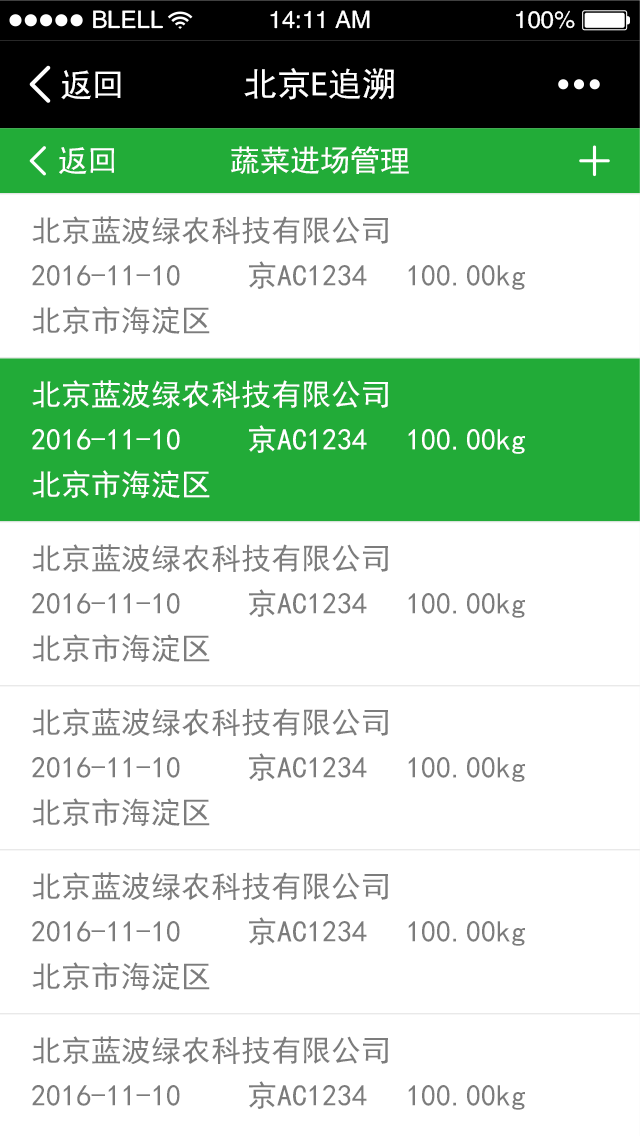
<style>
.page{position:relative;width:640px;height:1136px;background:#ffffff}
.page>*{position:absolute;margin:0}
.t1{font:24px "FZHTJW--GB1-0";color:#ffffff}
.t2{font:32px "SimHei";color:#ffffff}
.t3{font:34px "SimHei";color:#ffffff}
.t4{font:30px "SimHei";color:#ffffff}
.t5{font:30px/45px "SimHei";color:#7c7c7c}
.t6{font:30px/45px "SimHei";color:#ffffff}
</style>
<div class="page">
<p class="t1" style="left:93px;top:10px;width:70px;height:19px">BLELL</p>
<p class="t1" style="left:270px;top:10px;width:100px;height:19px">14:11 AM</p>
<p class="t1" style="left:516px;top:10px;width:59px;height:19px">100%</p>
<p class="t2" style="left:61px;top:70px;width:60px;height:30px">返回</p>
<p class="t3" style="left:244px;top:68px;width:150px;height:32px">北京E追溯</p>
<p class="t4" style="left:59px;top:147px;width:55px;height:27px">返回</p>
<p class="t4" style="left:231px;top:146px;width:178px;height:28px">蔬菜进场管理</p>
<p class="t5" style="left:32px;top:216px;width:493px;height:119px">北京蓝波绿农科技有限公司<br>2016-11-10  京AC1234  100.00kg<br>北京市海淀区</p>
<p class="t6" style="left:32px;top:380px;width:493px;height:119px">北京蓝波绿农科技有限公司<br>2016-11-10  京AC1234  100.00kg<br>北京市海淀区</p>
<p class="t5" style="left:32px;top:544px;width:493px;height:119px">北京蓝波绿农科技有限公司<br>2016-11-10  京AC1234  100.00kg<br>北京市海淀区</p>
<p class="t5" style="left:32px;top:708px;width:493px;height:119px">北京蓝波绿农科技有限公司<br>2016-11-10  京AC1234  100.00kg<br>北京市海淀区</p>
<p class="t5" style="left:32px;top:872px;width:493px;height:119px">北京蓝波绿农科技有限公司<br>2016-11-10  京AC1234  100.00kg<br>北京市海淀区</p>
<p class="t5" style="left:32px;top:1036px;width:493px;height:74px">北京蓝波绿农科技有限公司<br>2016-11-10  京AC1234  100.00kg</p>
</div>
